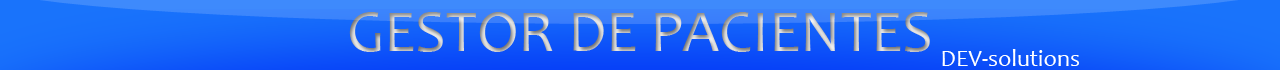
<style>
.page{position:relative;width:1280px;height:70px}
.page>*{position:absolute;margin:0}
.t1{font:60px "Candara"}
.t2{font:24px "Candara";color:#ffffff}
</style>
<div class="page">
<p class="t1" style="left:349px;top:12px;width:581px;height:40px">GESTOR DE PACIENTES</p>
<p class="t2" style="left:942px;top:49px;width:137px;height:17px">DEV-solutions</p>
</div>
